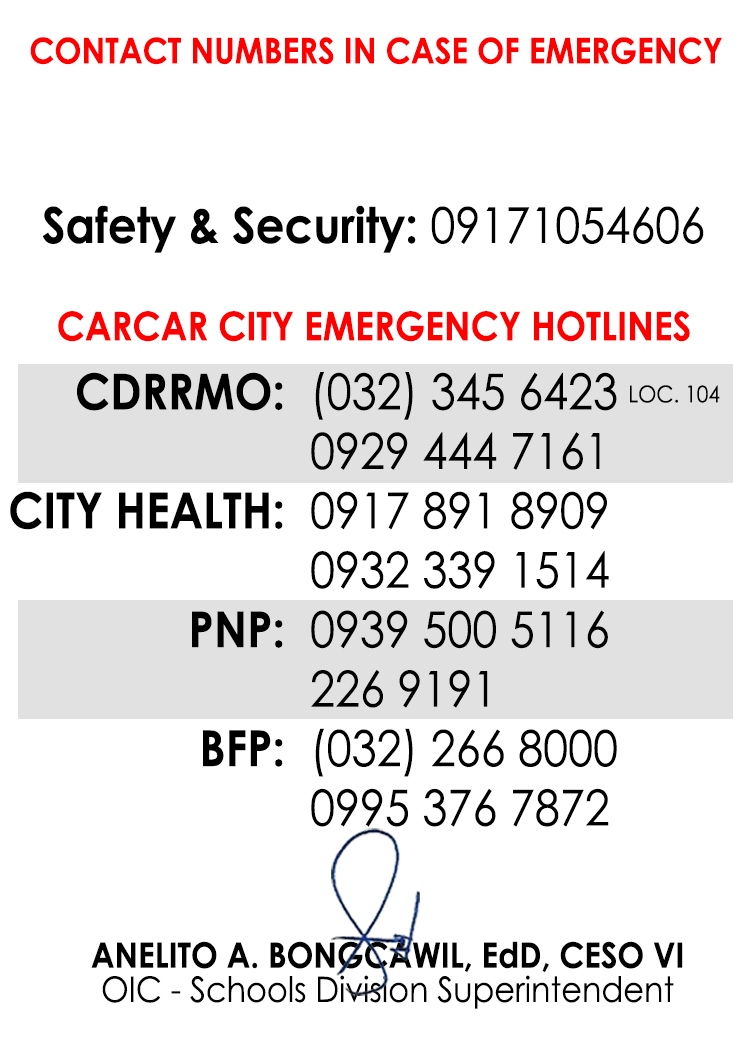
<style>
.page{position:relative;width:750px;height:1050px;background:#ffffff}
.page>*{position:absolute;margin:0}
.t1{font:35.4px "CenturyGothic-Bold";color:#ff0000;scale:0.91 1}
.t2{font:49.5px "CenturyGothic-Bold";color:#000000;scale:0.91 1}
.t3{font:49.5px "CenturyGothic";color:#000000;scale:0.91 1}
.t4{font:39.6px "CenturyGothic-Bold";color:#ff0000;scale:0.91 1}
.t5{font:23.1px "CenturyGothic";color:#000000;scale:0.91 1}
.t6{font:35px "CenturyGothic-Bold";color:#000000;scale:0.91 1}
.t7{font:35px "CenturyGothic";color:#000000;scale:0.91 1}
</style>
<div class="page">
<p class="t1" style="left:30px;top:37px;width:692px;height:28px">CONTACT NUMBERS IN CASE OF EMERGENCY</p>
<p class="t2" style="left:42px;top:205px;width:662px;height:48px">Safety &amp; Security:<span class="t3"> 09171054606</span></p>
<p class="t4" style="left:58px;top:311px;width:632px;height:31px">CARCAR CITY EMERGENCY HOTLINES</p>
<p class="t2" style="left:10px;top:372px;width:273px;height:395px;text-align:right">CDRRMO:<br><br>CITY HEALTH:<br><br>PNP:<br><br>BFP:</p>
<p class="t3" style="left:311px;top:372px;width:306px;height:455px">(032) 345 6423<br>0929 444 7161<br>0917 891 8909<br>0932 339 1514<br>0939 500 5116<br>226 9191<br>(032) 266 8000<br>0995 376 7872</p>
<p class="t5" style="left:630px;top:385px;width:90px;height:18px">LOC. 104</p>
<p class="t6" style="left:91px;top:941px;width:592px;height:31px">ANELITO A. BONGCAWIL, EdD, CESO VI</p>
<p class="t7" style="left:102px;top:975px;width:572px;height:34px">OIC - Schools Division Superintendent</p>
</div>
